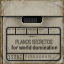
<style>
.page{position:relative;width:64px;height:64px}
.page>*{position:absolute;margin:0}
.t1{font:6.7px "CoolveticaRg-Regular";letter-spacing:-0.025em;color:#666055;scale:0.7 1}
</style>
<div class="page">
<p class="t1" style="left:15px;top:39px;width:38px;height:6px">PLANOS SECRETOS</p>
</div>
